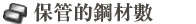
<style>
.page{position:relative;width:196px;height:24px;background:#ffffff}
.page>*{position:absolute;margin:0}
.t1{font:20px "RyuminPr6N-ExBold";color:#4b4742}
</style>
<div class="page">
<p class="t1" style="left:34px;top:2px;width:119px;height:20px">保管的鋼材數</p>
</div>
